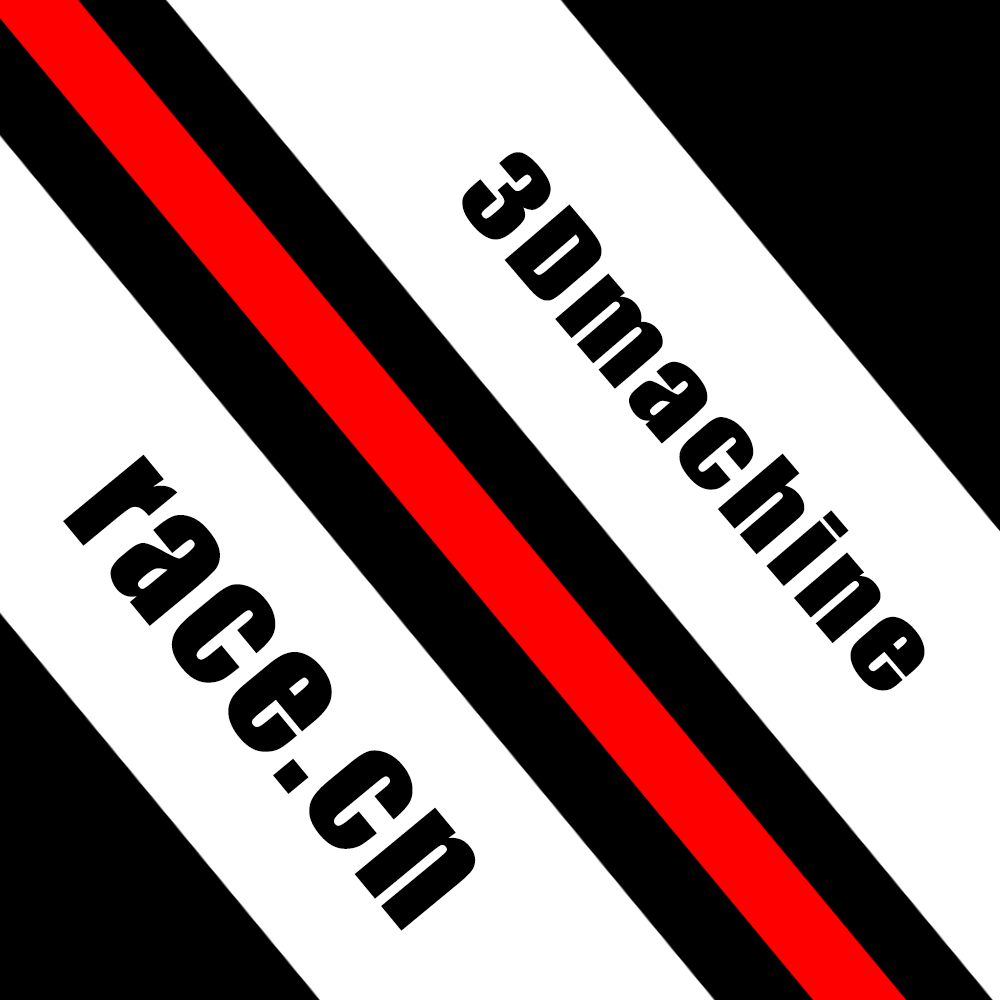
<style>
.page{position:relative;width:1000px;height:1000px;background:#ffffff}
.page>*{position:absolute;margin:0}
.t1{font:107.7px "Impact";letter-spacing:0.05em;color:#000000;scale:1.21 1}
.t2{font:160.8px "Impact";letter-spacing:0.05em;color:#000000}
</style>
<div class="page">
<p class="t1" style="left:462px;top:152px;width:463px;height:539px;rotate:49deg">3Dmachine</p>
<p class="t2" style="left:63px;top:454px;width:413px;height:477px;rotate:50deg">race.cn</p>
</div>
